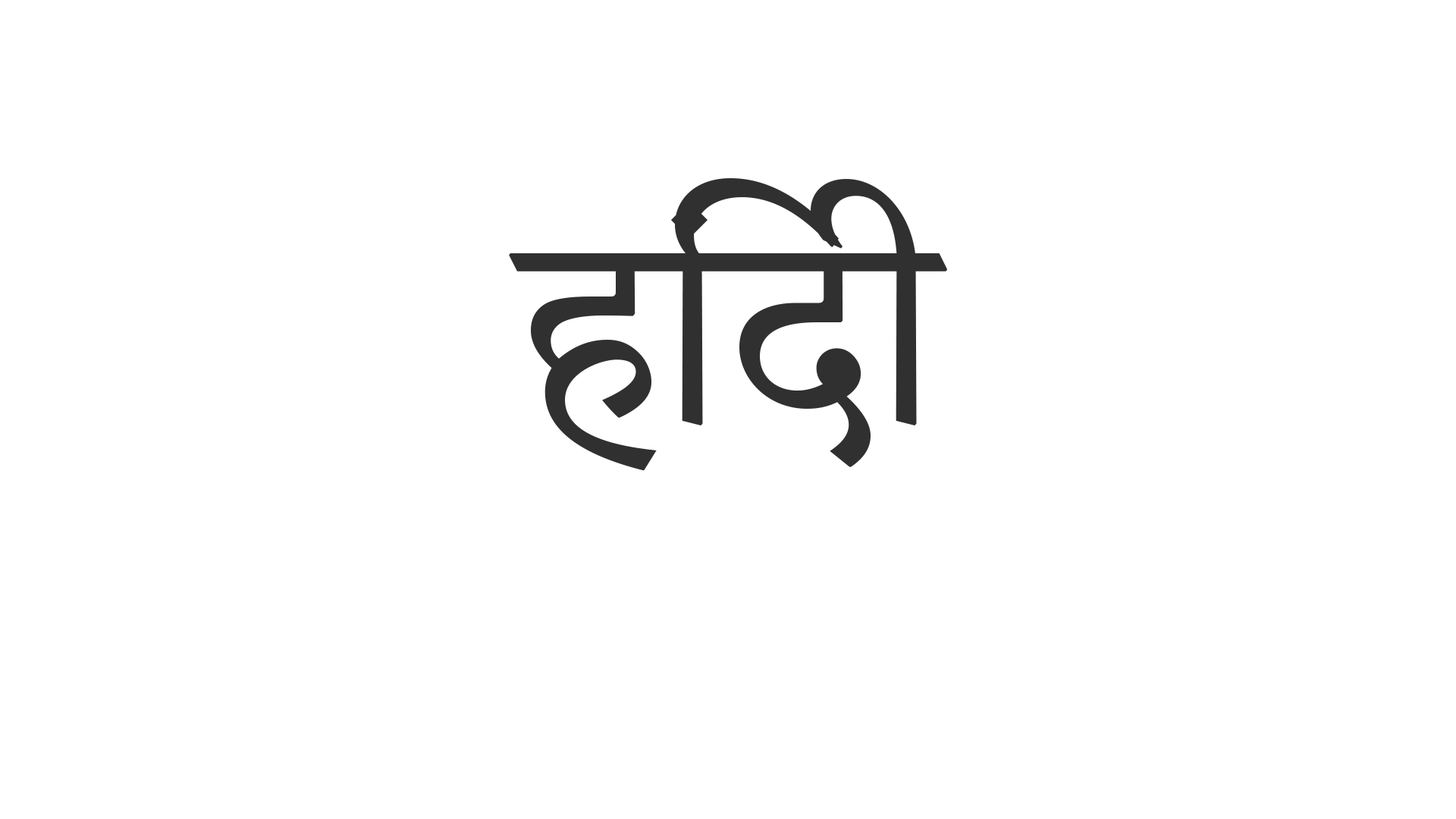
<style>
.page{position:relative;width:1456px;height:819px;background:#ffffff}
.page>*{position:absolute;margin:0}
.t1{font:341.2px "AdobeDevanagari-Regular";color:#303030}
</style>
<div class="page">
<p class="t1" style="left:509px;top:178px;width:439px;height:293px">हिंदी</p>
</div>
